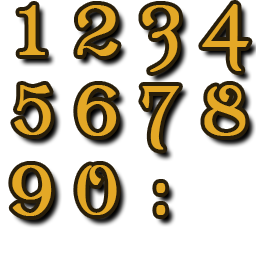
<style>
.page{position:relative;width:256px;height:256px;background:#ffffff}
.page>*{position:absolute;margin:0}
.t1{font:72px "Ametist";letter-spacing:0.06em;color:#e4a826;font-weight:bold}
</style>
<div class="page">
<p class="t1" style="left:19px;top:5px;width:26px;height:50px">1</p>
<p class="t1" style="left:77px;top:5px;width:41px;height:51px">2</p>
<p class="t1" style="left:142px;top:5px;width:37px;height:67px">3</p>
<p class="t1" style="left:202px;top:4px;width:47px;height:67px">4</p>
<p class="t1" style="left:14px;top:85px;width:37px;height:50px">5</p>
<p class="t1" style="left:77px;top:85px;width:40px;height:51px">6</p>
<p class="t1" style="left:142px;top:86px;width:37px;height:64px">7</p>
<p class="t1" style="left:204px;top:85px;width:42px;height:51px">8</p>
<p class="t1" style="left:12px;top:165px;width:40px;height:51px">9</p>
<p class="t1" style="left:77px;top:165px;width:40px;height:50px">0</p>
<p class="t1" style="left:156px;top:183px;width:10px;height:32px">:</p>
</div>
